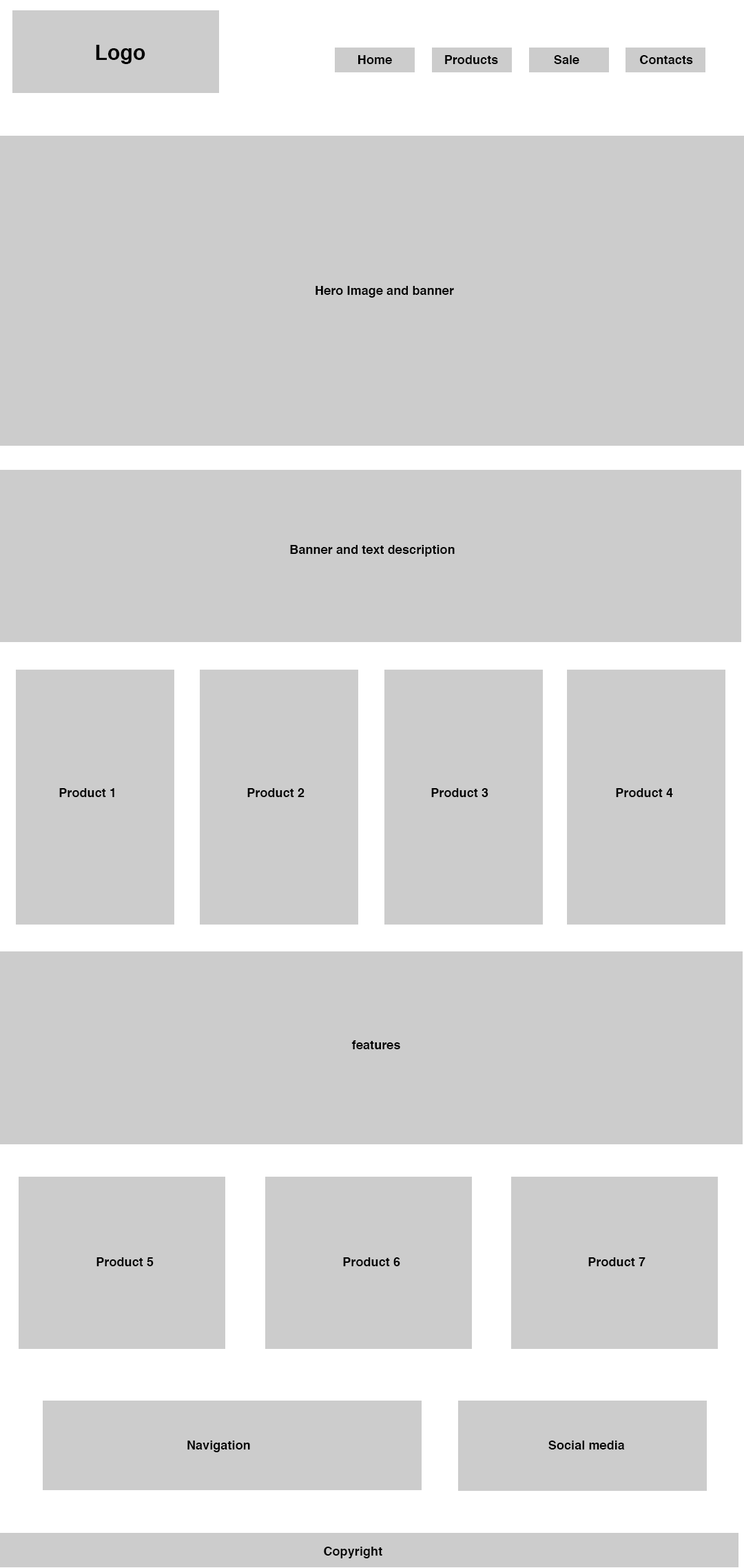
<style>
.page{position:relative;width:744px;height:1568px;background:#cccccc}
.page>*{position:absolute;margin:0}
.t1{font:20.7px "Helvetica-Bold";letter-spacing:0.005em;color:#020202}
.t2{font:12.4px "Helvetica-Bold";letter-spacing:0.005em;color:#020202}
</style>
<div class="page">
<p class="t1" style="left:96px;top:45px;width:49px;height:19px">Logo</p>
<p class="t2" style="left:358px;top:55px;width:34px;height:9px">Home</p>
<p class="t2" style="left:445px;top:55px;width:53px;height:9px">Products</p>
<p class="t2" style="left:554px;top:55px;width:25px;height:9px">Sale</p>
<p class="t2" style="left:640px;top:55px;width:53px;height:9px">Contacts</p>
<p class="t2" style="left:316px;top:286px;width:138px;height:12px">Hero Image and banner</p>
<p class="t2" style="left:290px;top:545px;width:165px;height:12px">Banner and text description</p>
<p class="t2" style="left:59px;top:788px;width:55px;height:9px">Product 1</p>
<p class="t2" style="left:247px;top:788px;width:58px;height:9px">Product 2</p>
<p class="t2" style="left:431px;top:788px;width:57px;height:9px">Product 3</p>
<p class="t2" style="left:616px;top:788px;width:57px;height:9px">Product 4</p>
<p class="t2" style="left:351px;top:1040px;width:49px;height:9px">features</p>
<p class="t2" style="left:96px;top:1257px;width:58px;height:9px">Product 5</p>
<p class="t2" style="left:343px;top:1257px;width:57px;height:9px">Product 6</p>
<p class="t2" style="left:588px;top:1257px;width:58px;height:9px">Product 7</p>
<p class="t2" style="left:187px;top:1441px;width:63px;height:11px">Navigation</p>
<p class="t2" style="left:548px;top:1441px;width:77px;height:9px">Social media</p>
<p class="t2" style="left:324px;top:1547px;width:58px;height:11px">Copyright</p>
</div>
